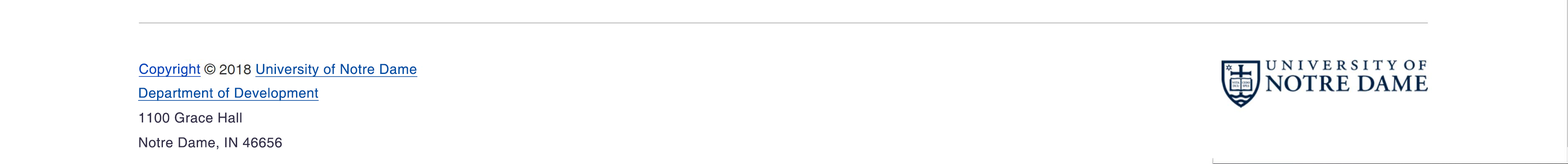
<style>
.page{position:relative;width:1568px;height:164px;background:#ffffff}
.page>*{position:absolute;margin:0}
.t1{font:13.7px "Helvetica";letter-spacing:0.025em;color:#0845ba;text-decoration:underline}
.t2{font:13.7px "Helvetica";letter-spacing:0.025em;color:#004da3;text-decoration:underline}
.t3{font:13.7px/24.7px "Helvetica";letter-spacing:0.025em;color:#343049}
.t4{font:13.7px/24.7px "Helvetica";letter-spacing:0.025em;color:#004da3;text-decoration:underline}
</style>
<div class="page">
<p class="t1" style="left:139px;top:63px;width:62px;height:14px">Copyright</p>
<p class="t2" style="left:255px;top:64px;width:162px;height:13px">University of Notre Dame</p>
<p class="t3" style="left:138px;top:87px;width:181px;height:62px"><span class="t4">Department of Development<br></span>1100 Grace Hall<br>Notre Dame, IN 46656</p>
</div>
